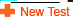
<style>
.page{position:relative;width:73px;height:17px;background:#ffffff}
.page>*{position:absolute;margin:0}
.t1{font:12px "ArialMT"}
</style>
<div class="page">
<p class="t1" style="left:21px;top:4px;width:49px;height:9px">New Test</p>
</div>
